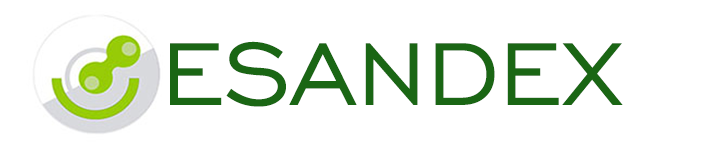
<style>
.page{position:relative;width:708px;height:150px;background:#ffffff}
.page>*{position:absolute;margin:0}
.t1{font:114.1px "EngraversGothicBT-Regular";color:#1a6614}
</style>
<div class="page">
<p class="t1" style="left:170px;top:41px;width:453px;height:66px">ESANDEX</p>
</div>
